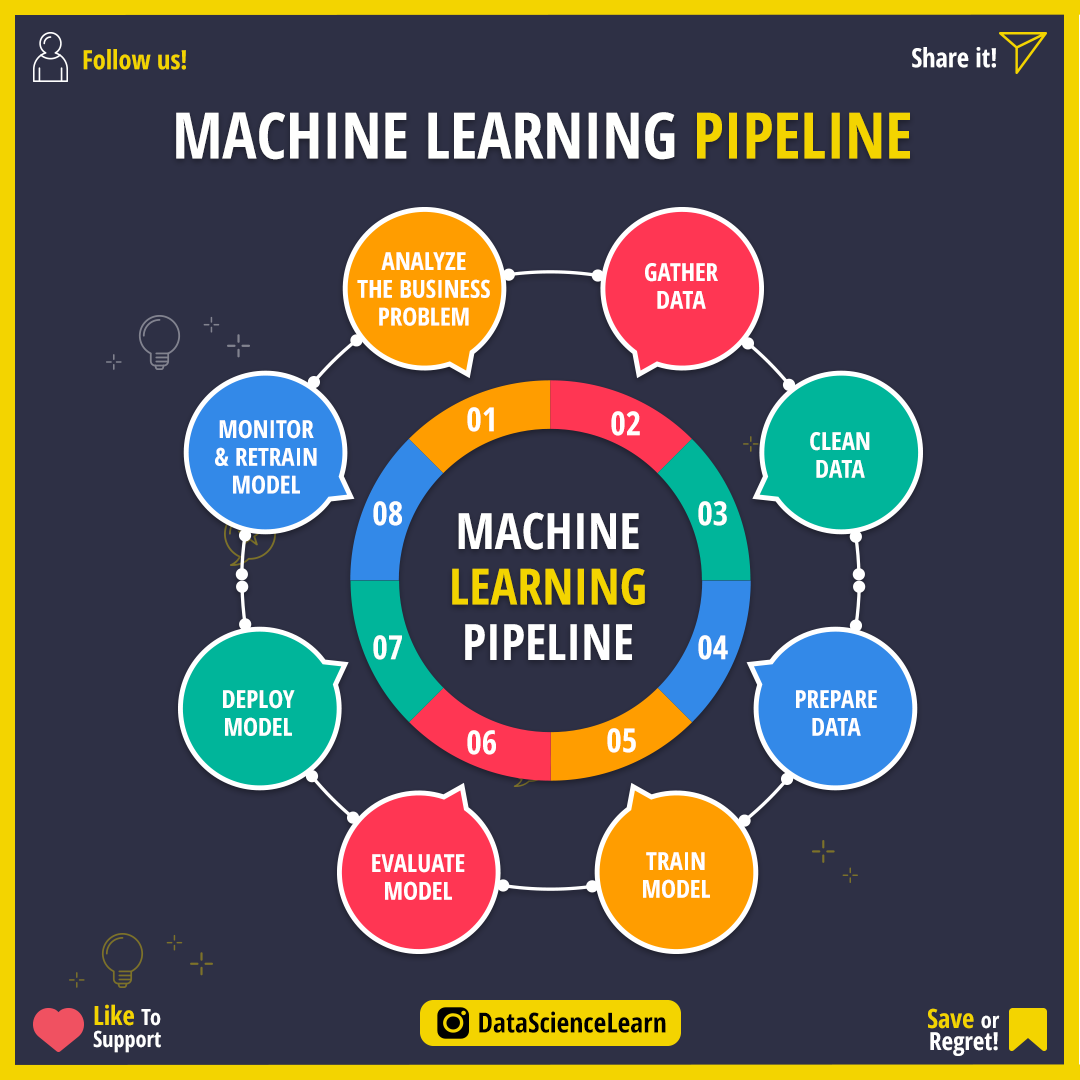
<style>
.page{position:relative;width:1080px;height:1080px;background:#2e3045}
.page>*{position:absolute;margin:0}
.t1{font:26.4px "OpenSans-CondensedBold";color:#f3d400}
.t2{font:26.4px "OpenSans-CondensedBold";color:#ffffff}
.t3{font:63.9px "OpenSans-CondensedBold";color:#fffffe}
.t4{font:63.9px "OpenSans-CondensedBold";color:#f3d400}
.t5{font:25px/27.8px "OpenSans-CondensedBold";color:#ffffff}
.t6{font:33.3px "OpenSans-CondensedBold";color:#fffffe}
.t7{font:50px/55.6px "OpenSans-CondensedBold";color:#f3d400}
.t8{font:50px/55.6px "OpenSans-CondensedBold";color:#ffffff}
.t9{font:22.2px/22.2px "OpenSans-CondensedBold";color:#ffffff}
.t10{font:26.4px/22.2px "OpenSans-CondensedBold";color:#f3d400}
.t11{font:27.8px "OpenSans-CondensedBold";color:#000000}
.t12{font:25px/22.2px "OpenSans-CondensedBold";color:#ffffff}
</style>
<div class="page">
<p class="t1" style="left:83px;top:49px;width:103px;height:21px">Follow us!</p>
<p class="t2" style="left:912px;top:47px;width:84px;height:21px">Share it!</p>
<p class="t3" style="left:176px;top:112px;width:734px;height:48px">MACHINE LEARNING <span class="t4">PIPELINE</span></p>
<p class="t5" style="left:357px;top:252px;width:133px;height:74px;text-align:center">ANALYZE<br>THE BUSINESS<br>PROBLEM</p>
<p class="t5" style="left:645px;top:263px;width:73px;height:46px;text-align:center">GATHER<br>DATA</p>
<p class="t6" style="left:467px;top:407px;width:27px;height:25px">01</p>
<p class="t6" style="left:611px;top:411px;width:29px;height:25px">02</p>
<p class="t5" style="left:215px;top:420px;width:102px;height:74px;text-align:center">MONITOR<br>&amp; RETRAIN<br>MODEL</p>
<p class="t5" style="left:810px;top:432px;width:60px;height:46px;text-align:center">CLEAN<br>DATA</p>
<p class="t6" style="left:373px;top:501px;width:29px;height:25px">08</p>
<p class="t6" style="left:698px;top:501px;width:29px;height:25px">03</p>
<p class="t7" style="left:452px;top:512px;width:193px;height:148px;text-align:center"><span class="t8">MACHINE<br></span>LEARNING<br><span class="t8">PIPELINE</span></p>
<p class="t6" style="left:373px;top:635px;width:29px;height:25px">07</p>
<p class="t6" style="left:698px;top:635px;width:30px;height:25px">04</p>
<p class="t5" style="left:223px;top:690px;width:72px;height:46px;text-align:center">DEPLOY<br>MODEL</p>
<p class="t5" style="left:796px;top:690px;width:81px;height:46px;text-align:center">PREPARE<br>DATA</p>
<p class="t6" style="left:467px;top:730px;width:29px;height:25px">06</p>
<p class="t6" style="left:607px;top:728px;width:29px;height:25px">05</p>
<p class="t5" style="left:372px;top:854px;width:93px;height:46px;text-align:center">EVALUATE<br>MODEL</p>
<p class="t5" style="left:643px;top:852px;width:67px;height:46px;text-align:center">TRAIN<br>MODEL</p>
<p class="t9" style="left:93px;top:1004px;width:68px;height:49px"><span class="t10">Like </span>To<br>Support</p>
<p class="t11" style="left:479px;top:1011px;width:187px;height:22px">DataScienceLearn</p>
<p class="t12" style="left:928px;top:1008px;width:72px;height:48px;text-align:right"><span class="t10">Save </span><span class="t9">or<br></span>Regret!</p>
</div>
